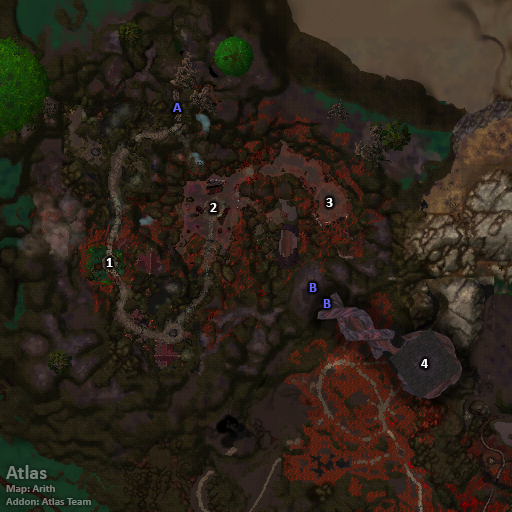
<style>
.page{position:relative;width:512px;height:512px}
.page>*{position:absolute;margin:0}
.t1{font:14px "Calibri-Bold";color:#6666ff}
.t2{font:14px "Calibri-Bold";color:#ffffff}
.t3{font:11px "Calibri-Bold";color:#7b847d}
.t4{font:20px "Calibri-Bold";color:#7b847d}
</style>
<div class="page">
<p class="t1" style="left:173px;top:103px;width:9px;height:9px">A</p>
<p class="t2" style="left:326px;top:198px;width:7px;height:9px">3</p>
<p class="t2" style="left:210px;top:203px;width:7px;height:9px">2</p>
<p class="t2" style="left:106px;top:258px;width:7px;height:9px">1</p>
<p class="t1" style="left:309px;top:283px;width:8px;height:9px">B</p>
<p class="t1" style="left:323px;top:299px;width:8px;height:9px">B</p>
<p class="t2" style="left:421px;top:359px;width:7px;height:9px">4</p>
<p class="t3" style="left:6px;top:465px;width:85px;height:40px"><span class="t4">Atlas<br></span>Map: Arith<br>Addon: Atlas Team</p>
</div>
